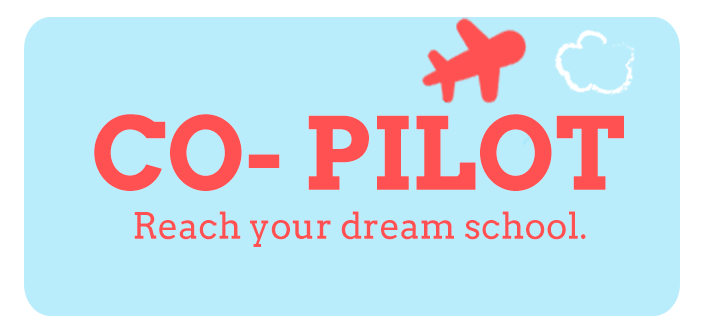
<style>
.page{position:relative;width:715px;height:333px;background:#b9edfb}
.page>*{position:absolute;margin:0}
.t1{font:100px "Arvo-Bold";color:#ff5151}
.t2{font:36px "Arvo";color:#ff5151}
</style>
<div class="page">
<p class="t1" style="left:94px;top:114px;width:530px;height:77px">CO- PILOT</p>
<p class="t2" style="left:134px;top:211px;width:452px;height:36px">Reach your dream school.</p>
</div>
